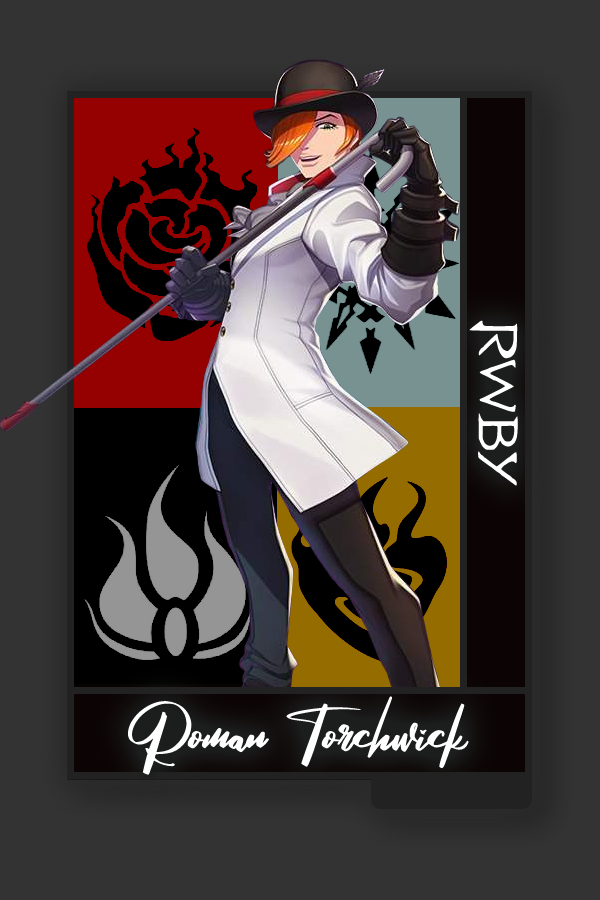
<style>
.page{position:relative;width:600px;height:900px;background:#333333}
.page>*{position:absolute;margin:0}
.t1{font:61.3px "RWBY_Style";color:#ffffff;scale:1.25 1}
.t2{font:76.6px "RosegaFREE";color:#ffffff;scale:0.91 1}
</style>
<div class="page">
<p class="t1" style="left:469px;top:320px;width:49px;height:166px;rotate:90deg">RWBY</p>
<p class="t2" style="left:127px;top:696px;width:342px;height:80px">Roman Torchwick</p>
</div>
